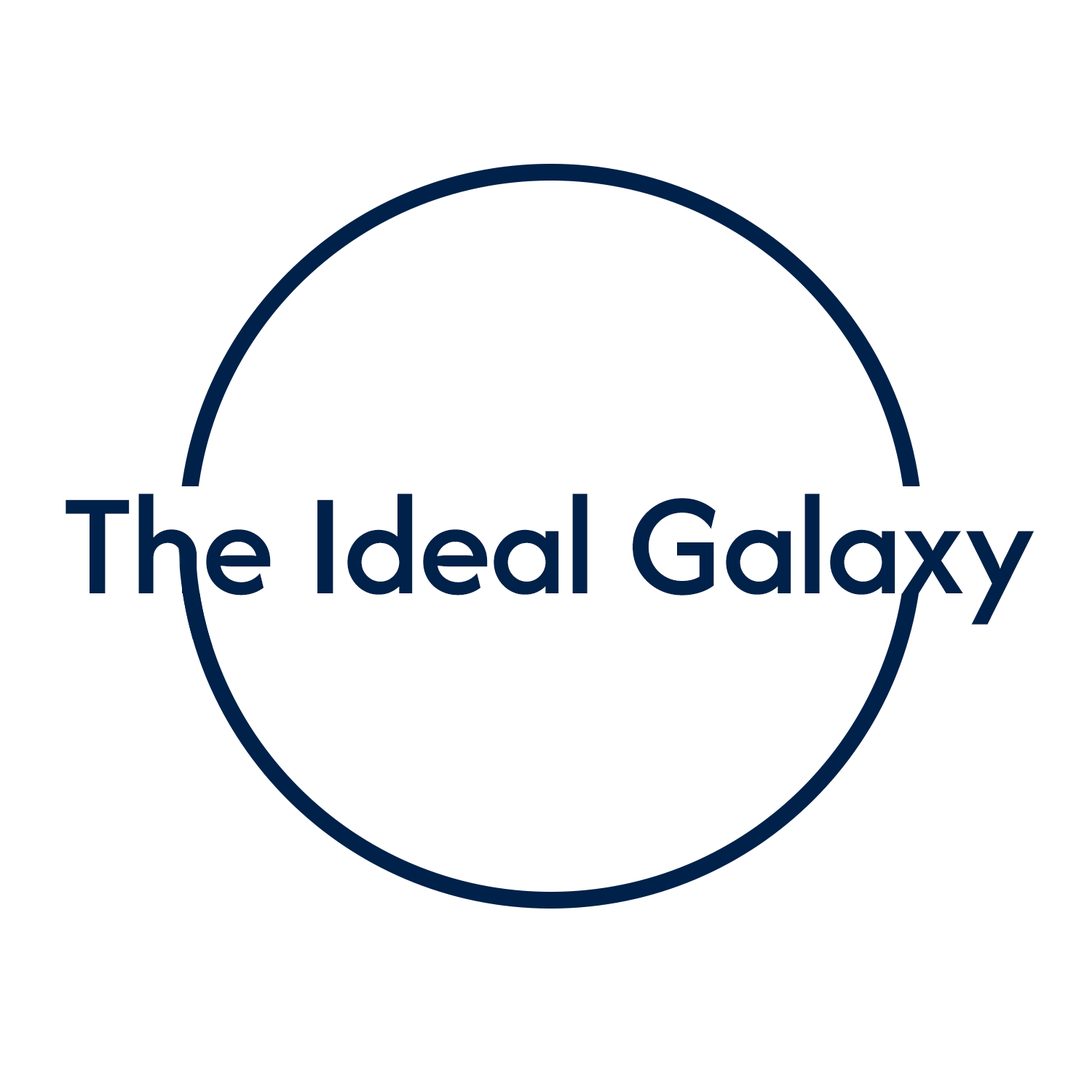
<style>
.page{position:relative;width:1092px;height:1092px;background:#ffffff}
.page>*{position:absolute;margin:0}
.t1{font:149.2px "AfacadFlux-Medium";color:#002149}
</style>
<div class="page">
<p class="t1" style="left:66px;top:494px;width:968px;height:131px">The Ideal Galaxy</p>
</div>
